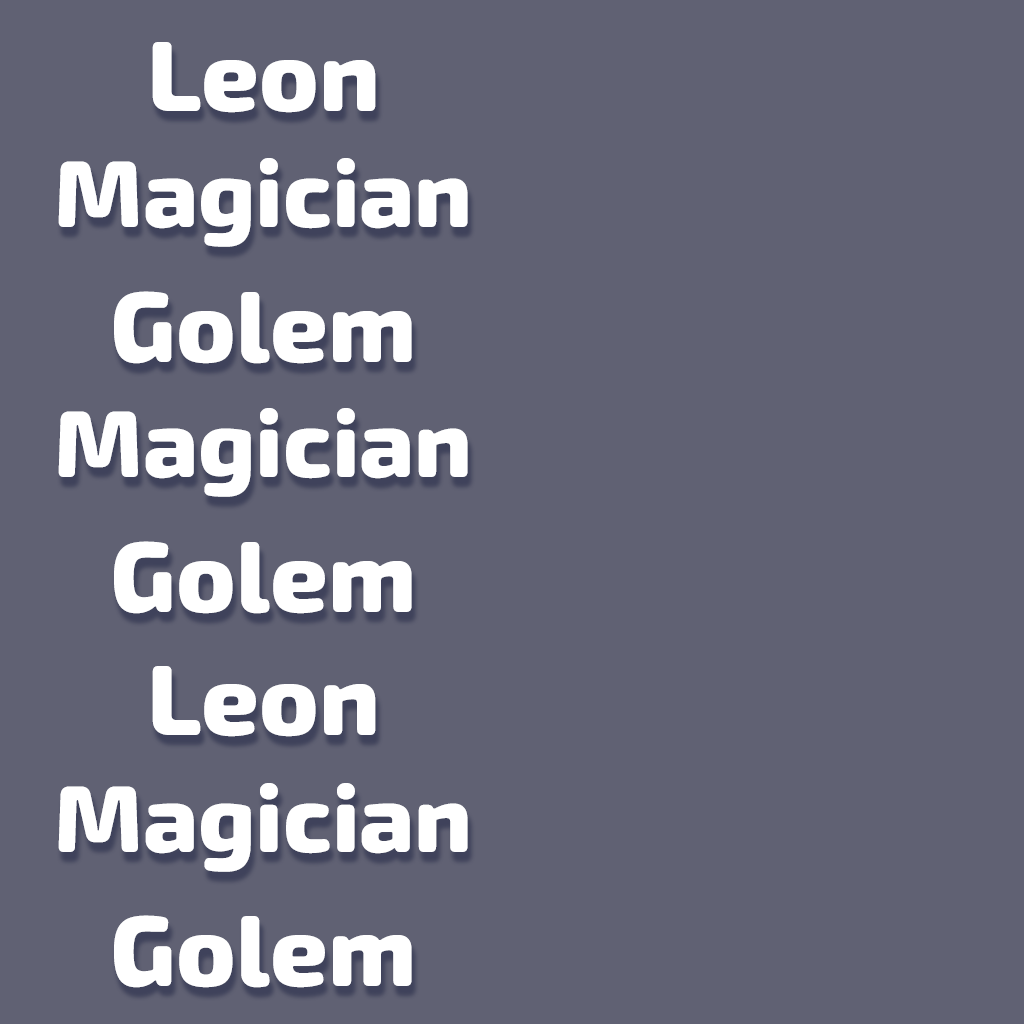
<style>
.page{position:relative;width:1024px;height:1024px;background:#606173}
.page>*{position:absolute;margin:0}
.t1{font:100px "RandomDiceChessFont";color:#ffffff}
.t2{font:95px "RandomDiceChessFont";color:#ffffff}
</style>
<div class="page">
<p class="t1" style="left:152px;top:42px;width:224px;height:71px">Leon</p>
<p class="t2" style="left:58px;top:158px;width:410px;height:89px">Magician</p>
<p class="t1" style="left:114px;top:291px;width:298px;height:73px">Golem</p>
<p class="t2" style="left:58px;top:408px;width:410px;height:89px">Magician</p>
<p class="t1" style="left:114px;top:541px;width:298px;height:73px">Golem</p>
<p class="t1" style="left:152px;top:666px;width:224px;height:71px">Leon</p>
<p class="t2" style="left:58px;top:783px;width:410px;height:89px">Magician</p>
<p class="t1" style="left:114px;top:915px;width:298px;height:73px">Golem</p>
</div>
